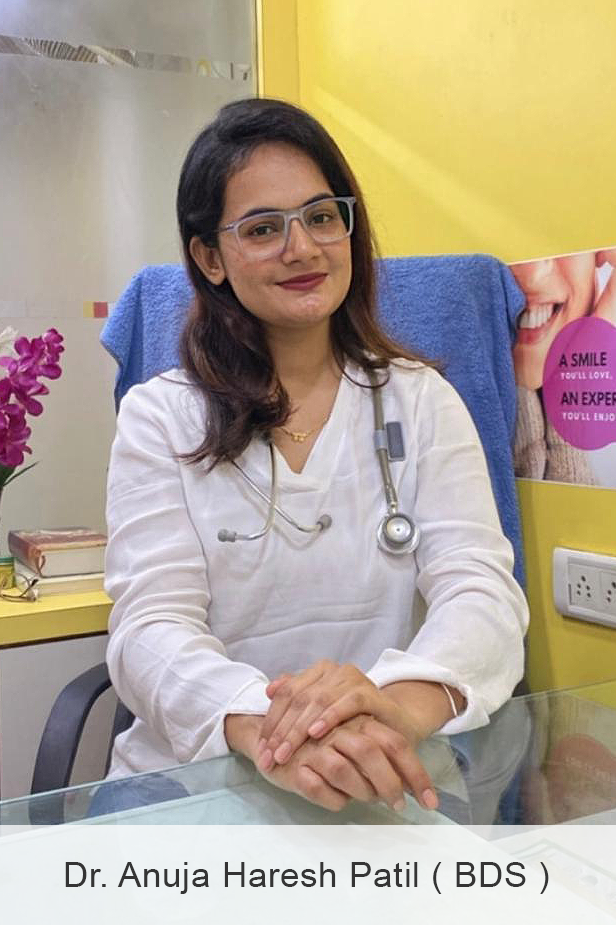
<style>
.page{position:relative;width:616px;height:925px}
.page>*{position:absolute;margin:0}
.t1{font:35px "ArialMT";letter-spacing:0.02em;color:#343434}
.t2{font:35px "SegoeUIHistoric";letter-spacing:0.02em;color:#343434}
</style>
<div class="page">
<p class="t1" style="left:65px;top:862px;width:484px;height:32px"><span class="t2"><br></span>Dr. Anuja Haresh Patil ( BDS )</p>
</div>
